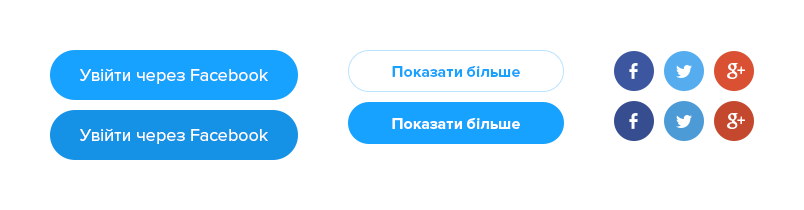
<style>
.page{position:relative;width:804px;height:210px;background:#ffffff}
.page>*{position:absolute;margin:0}
.t1{font:18px "ProximaNova-Regular";color:#ffffff}
.t2{font:16px "ProximaNova-Bold";color:#17a2ff}
.t3{font:16px "ProximaNova-Bold";color:#ffffff}
</style>
<div class="page">
<p class="t1" style="left:80px;top:68px;width:188px;height:16px">Увійти через Facebook</p>
<p class="t2" style="left:392px;top:66px;width:128px;height:11px">Показати більше</p>
<p class="t3" style="left:392px;top:118px;width:128px;height:11px">Показати більше</p>
<p class="t1" style="left:80px;top:128px;width:188px;height:16px">Увійти через Facebook</p>
</div>
